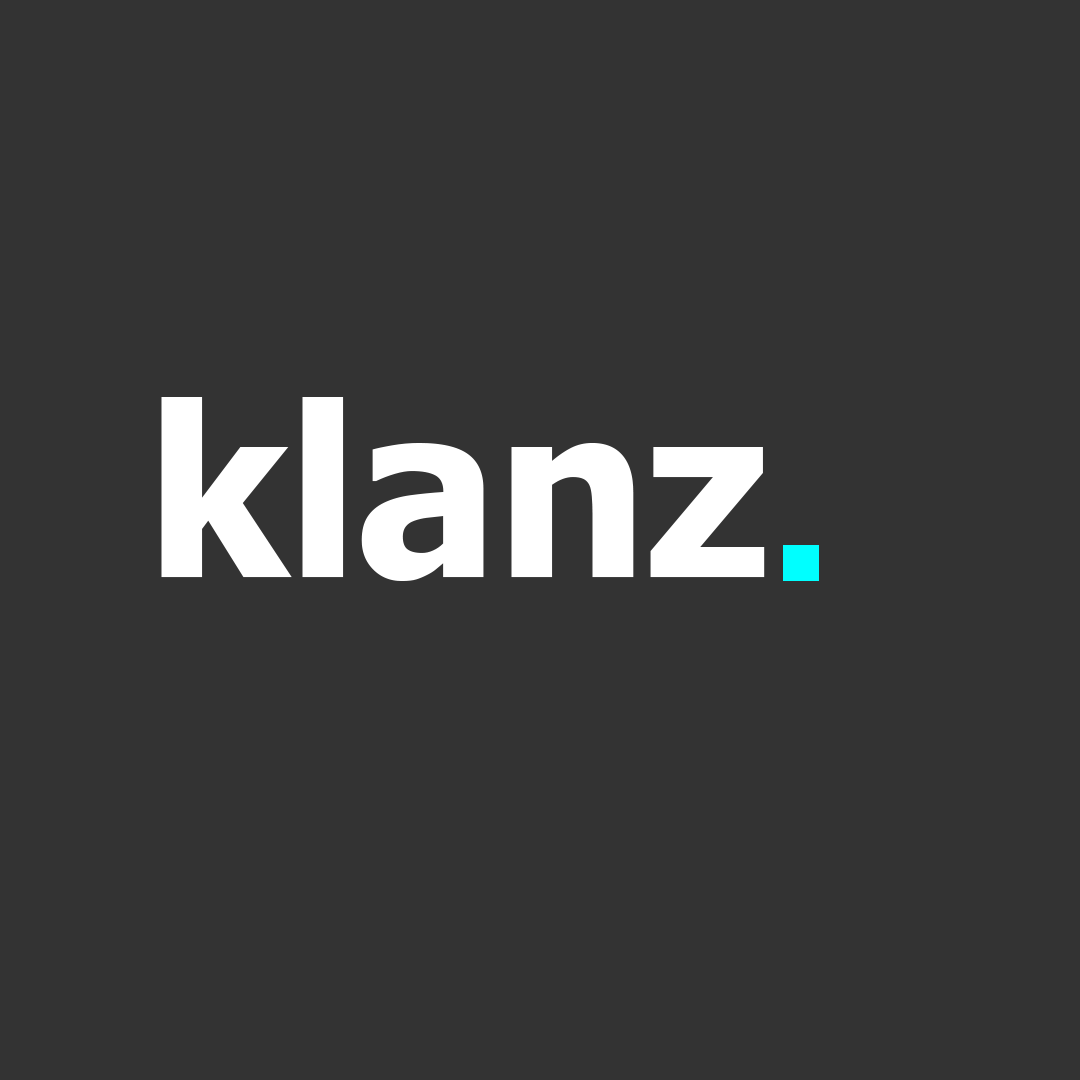
<style>
.page{position:relative;width:1080px;height:1080px;background:#333333}
.page>*{position:absolute;margin:0}
.t1{font:237.3px "Tahoma-Bold";letter-spacing:-0.01em;color:#ffffff}
</style>
<div class="page">
<p class="t1" style="left:161px;top:397px;width:604px;height:184px">klanz</p>
</div>
